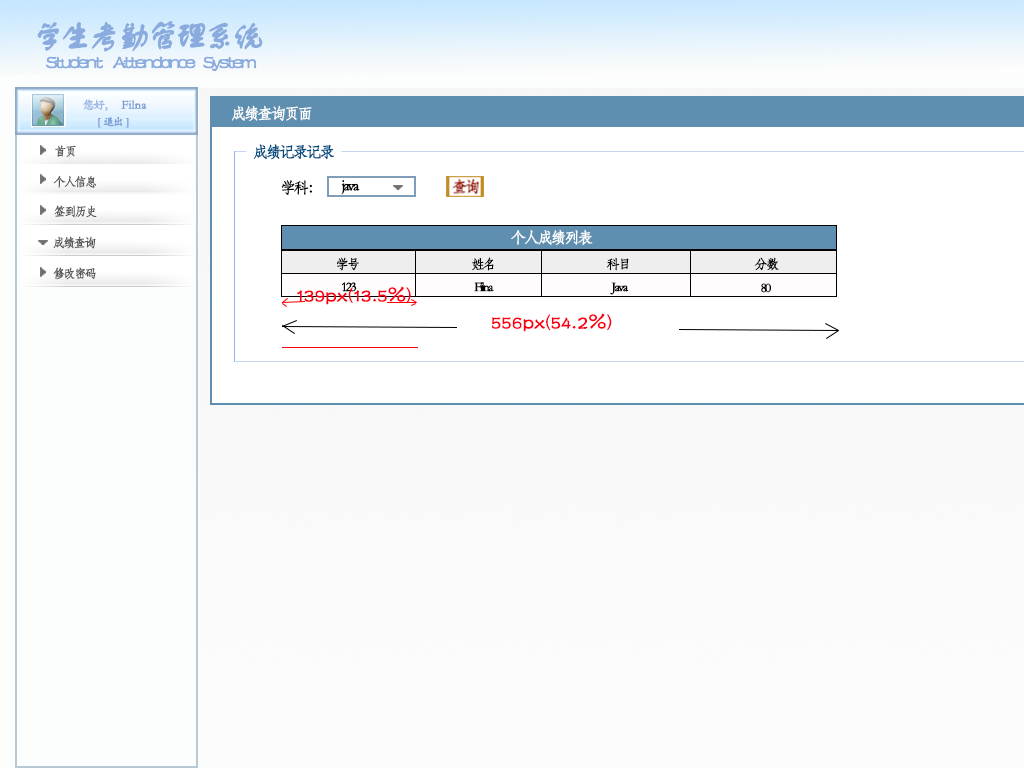
<style>
.page{position:relative;width:1024px;height:768px;background:#ffffff}
.page>*{position:absolute;margin:0}
.t1{font:32.7px "FZSTK--GBK1-0";letter-spacing:-0.15em;color:#89abde;font-weight:bold}
.t2{font:19.6px "FZSTK--GBK1-0";letter-spacing:-0.15em;color:#89abde;font-weight:bold}
.t3{font:12px "STKaiti";letter-spacing:-0.15em;color:#99b7e5;font-weight:bold}
.t4{font:12px "STKaiti";color:#789cd3;font-weight:bold}
.t5{font:15.3px "STFangsong";letter-spacing:-0.15em;color:#fdfefe;font-weight:bold}
.t6{font:10.9px "STKaiti";letter-spacing:-0.15em;color:#789cd3;font-weight:bold}
.t7{font:12px "STFangsong";letter-spacing:-0.15em;color:#555555;font-weight:bold}
.t8{font:15.3px "STFangsong";letter-spacing:-0.15em;color:#014e82;font-weight:bold}
.t9{font:15.3px "STFangsong";letter-spacing:-0.15em;color:#030303;font-weight:bold}
.t10{font:13.1px "STFangsong";letter-spacing:-0.15em;color:#020202;font-weight:bold}
.t11{font:19.6px "FZSTK--GBK1-0";color:#fb0012;font-weight:bold}
</style>
<div class="page">
<p class="t1" style="left:37px;top:21px;width:226px;height:31px">学生考勤管理系统</p>
<p class="t2" style="left:46px;top:56px;width:211px;height:16px">Student     Attendance    System</p>
<p class="t3" style="left:83px;top:99px;width:25px;height:12px">您好，</p>
<p class="t4" style="left:121px;top:100px;width:26px;height:9px">Filna</p>
<p class="t5" style="left:231px;top:105px;width:81px;height:16px">成绩查询页面</p>
<p class="t6" style="left:98px;top:116px;width:31px;height:12px">[   退出   ]</p>
<p class="t7" style="left:55px;top:145px;width:21px;height:12px">首页</p>
<p class="t8" style="left:253px;top:144px;width:82px;height:16px">成绩记录记录</p>
<p class="t7" style="left:53px;top:175px;width:43px;height:13px">个人信息</p>
<p class="t9" style="left:281px;top:180px;width:31px;height:15px">学科：</p>
<p class="t9" style="left:341px;top:180px;width:19px;height:15px">java</p>
<p class="t7" style="left:54px;top:205px;width:43px;height:13px">签到历史</p>
<p class="t5" style="left:511px;top:229px;width:82px;height:16px">个人成绩列表</p>
<p class="t7" style="left:53px;top:236px;width:43px;height:13px">成绩查询</p>
<p class="t10" style="left:337px;top:257px;width:22px;height:14px">学号</p>
<p class="t10" style="left:472px;top:257px;width:22px;height:14px">姓名</p>
<p class="t10" style="left:606px;top:257px;width:23px;height:14px">科目</p>
<p class="t10" style="left:754px;top:257px;width:25px;height:14px">分数</p>
<p class="t7" style="left:53px;top:267px;width:43px;height:13px">修改密码</p>
<p class="t11" style="left:296px;top:286px;width:115px;height:19px">139px(13.5%)</p>
<p class="t10" style="left:342px;top:282px;width:15px;height:10px">123</p>
<p class="t10" style="left:474px;top:282px;width:20px;height:10px">Filna</p>
<p class="t10" style="left:610px;top:282px;width:19px;height:13px">Java</p>
<p class="t10" style="left:761px;top:283px;width:10px;height:10px">80</p>
<p class="t11" style="left:491px;top:313px;width:121px;height:19px">556px(54.2%)</p>
</div>
